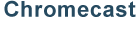
<style>
.page{position:relative;width:140px;height:30px;background:#ffffff}
.page>*{position:absolute;margin:0}
.t1{font:22px "Arial-BoldMT";letter-spacing:0.025em;color:#264a60}
</style>
<div class="page">
<p class="t1" style="left:4px;top:0px;width:132px;height:17px">Chromecast</p>
</div>
